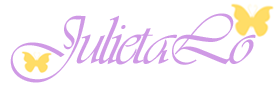
<style>
.page{position:relative;width:274px;height:86px;background:#ffffff}
.page>*{position:absolute;margin:0}
.t1{font:72px "Vivaldii";letter-spacing:-0.05em;color:#cf99e5}
</style>
<div class="page">
<p class="t1" style="left:10px;top:13px;width:246px;height:70px">JulietaLo</p>
</div>
